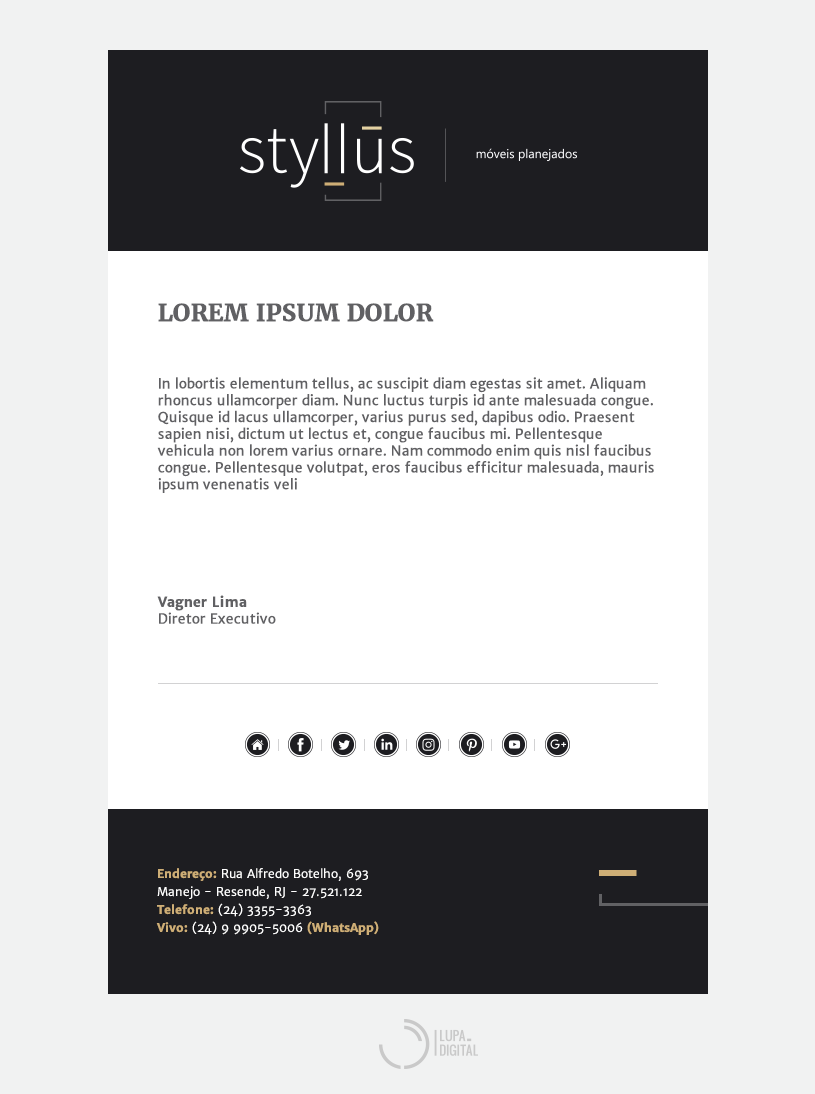
<style>
.page{position:relative;width:815px;height:1094px;background:#f1f2f2}
.page>*{position:absolute;margin:0}
.t1{font:14px "MerriweatherSans-Regular";color:#606063}
.t2{font:24px "Merriweather-Bold";color:#606063}
.t3{font:14px "MerriweatherSans-Bold";color:#606063}
.t4{font:12px/18px "MerriweatherSans-Light";color:#ffffff}
.t5{font:12px/18px "MerriweatherSans-Bold";color:#ceae76}
</style>
<div class="page">
<p class="t1" style="left:157px;top:303px;width:497px;height:321px"><span class="t2">LOREM IPSUM DOLOR<br></span><br><br><br>In lobortis elementum tellus, ac suscipit diam egestas sit amet. Aliquam rhoncus ullamcorper diam. Nunc luctus turpis id ante malesuada congue. Quisque id lacus ullamcorper, varius purus sed, dapibus odio. Praesent sapien nisi, dictum ut lectus et, congue faucibus mi. Pellentesque vehicula non lorem varius ornare. Nam commodo enim quis nisl faucibus congue. Pellentesque volutpat, eros faucibus efficitur malesuada, mauris ipsum venenatis veli<br><br><br><br><br><br><br><span class="t3">Vagner Lima<br></span>Diretor Executivo</p>
<p class="t4" style="left:156px;top:868px;width:223px;height:67px"><span class="t5">Endereço: </span>Rua Alfredo Botelho, 693<br>Manejo - Resende, RJ - 27.521.122<br><span class="t5">Telefone:</span> (24) 3355-3363<br><span class="t5">Vivo:</span> (24) 9 9905-5006 <span class="t5">(WhatsApp)</span></p>
</div>
